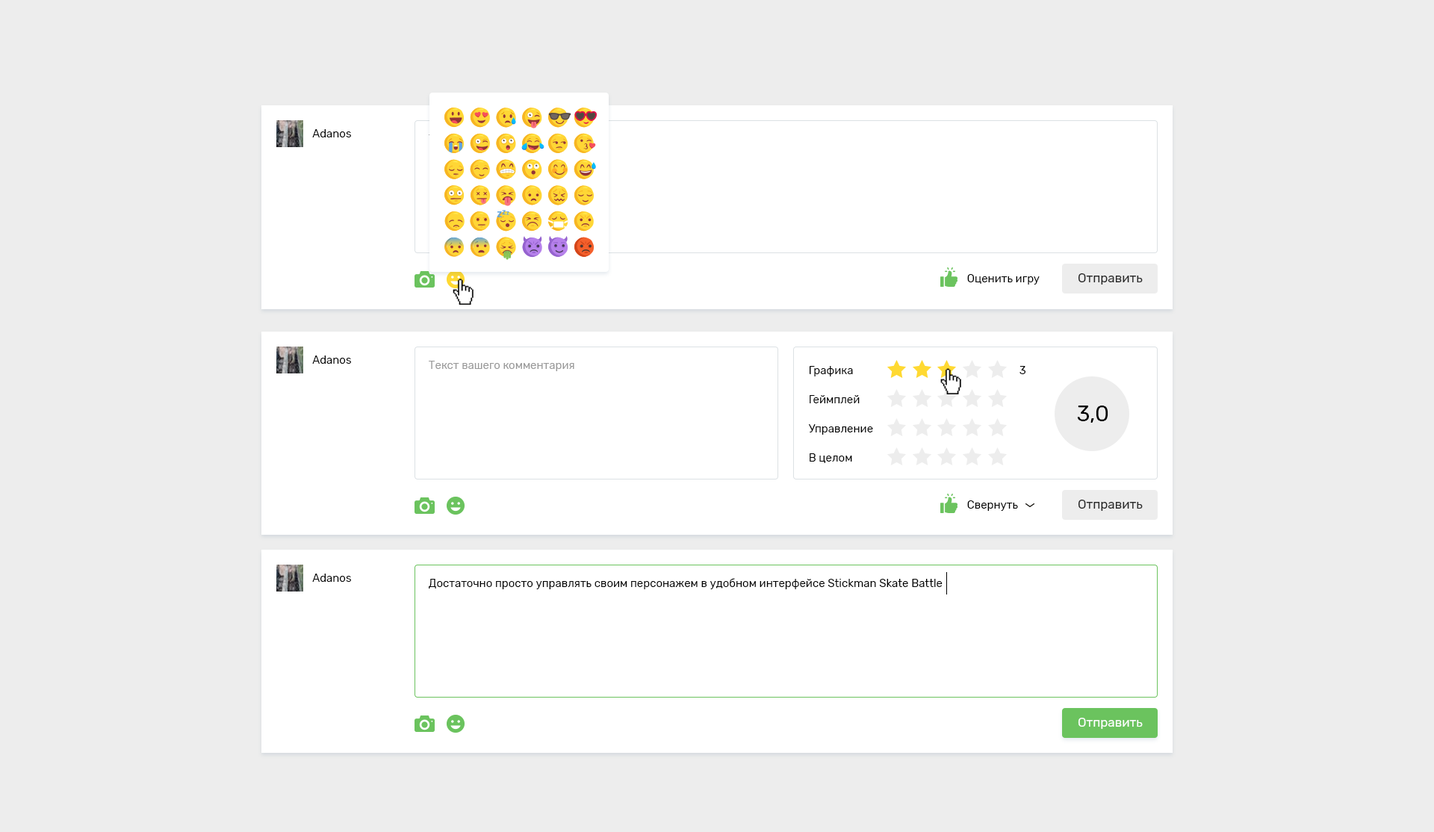
<style>
.page{position:relative;width:1434px;height:832px;background:#ededed}
.page>*{position:absolute;margin:0}
.t1{font:11.3px "Rubik-Regular";color:#000000}
.t2{font:11.2px "Rubik-Regular";color:#000000}
.t3{font:12.7px "Rubik-Regular";color:#272727}
.t4{font:11.2px "Rubik-Regular";color:#999999}
.t5{font:22.4px "Rubik-Regular";color:#000000}
.t6{font:12.7px "Rubik-Regular";color:#ffffff}
</style>
<div class="page">
<p class="t1" style="left:312px;top:129px;width:39px;height:8px">Adanos</p>
<p class="t2" style="left:967px;top:274px;width:72px;height:10px">Оценить игру</p>
<p class="t3" style="left:1077px;top:273px;width:65px;height:11px">Отправить</p>
<p class="t1" style="left:312px;top:355px;width:39px;height:9px">Adanos</p>
<p class="t4" style="left:429px;top:361px;width:145px;height:10px">Текст вашего комментария</p>
<p class="t2" style="left:809px;top:366px;width:44px;height:10px">Графика</p>
<p class="t2" style="left:1019px;top:366px;width:7px;height:8px">3</p>
<p class="t2" style="left:809px;top:395px;width:50px;height:8px">Геймплей</p>
<p class="t5" style="left:1077px;top:405px;width:31px;height:18px">3,0</p>
<p class="t2" style="left:808px;top:424px;width:65px;height:11px">Управление</p>
<p class="t2" style="left:809px;top:453px;width:43px;height:10px">В целом</p>
<p class="t2" style="left:967px;top:500px;width:51px;height:11px">Свернуть</p>
<p class="t3" style="left:1077px;top:500px;width:65px;height:11px">Отправить</p>
<p class="t1" style="left:312px;top:573px;width:39px;height:9px">Adanos</p>
<p class="t2" style="left:429px;top:578px;width:513px;height:11px">Достаточно просто управлять своим персонажем в удобном интерфейсе Stickman Skate Battle</p>
<p class="t6" style="left:1077px;top:718px;width:65px;height:11px">Отправить</p>
</div>
